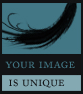
<style>
.page{position:relative;width:83px;height:94px;background:#121315}
.page>*{position:absolute;margin:0}
.t1{font:14px "ACaslonPro-Regular";color:#427785;font-variant:small-caps}
.t2{font:14px "ACaslonPro-Regular";color:#121315;font-variant:small-caps}
</style>
<div class="page">
<p class="t1" style="left:5px;top:61px;width:70px;height:8px">your image</p>
<p class="t2" style="left:9px;top:79px;width:56px;height:9px">is unique</p>
</div>
